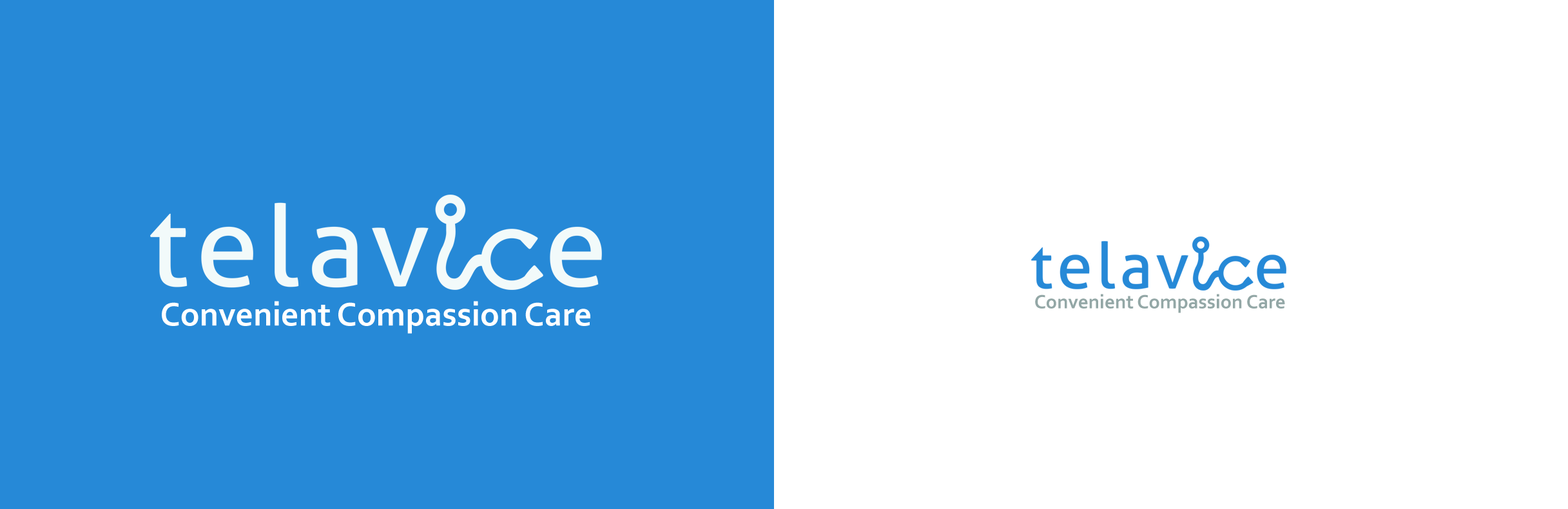
<style>
.page{position:relative;width:1568px;height:509px;background:#ffffff}
.page>*{position:absolute;margin:0}
.t1{font:20.2px "Corbel-Bold";color:#93a7a6}
.t2{font:34.5px "Corbel-Bold";color:#ffffff}
</style>
<div class="page">
<p class="t1" style="left:1035px;top:294px;width:250px;height:19px">Convenient Compassion Care</p>
<p class="t2" style="left:162px;top:301px;width:428px;height:33px">Convenient Compassion Care</p>
</div>
